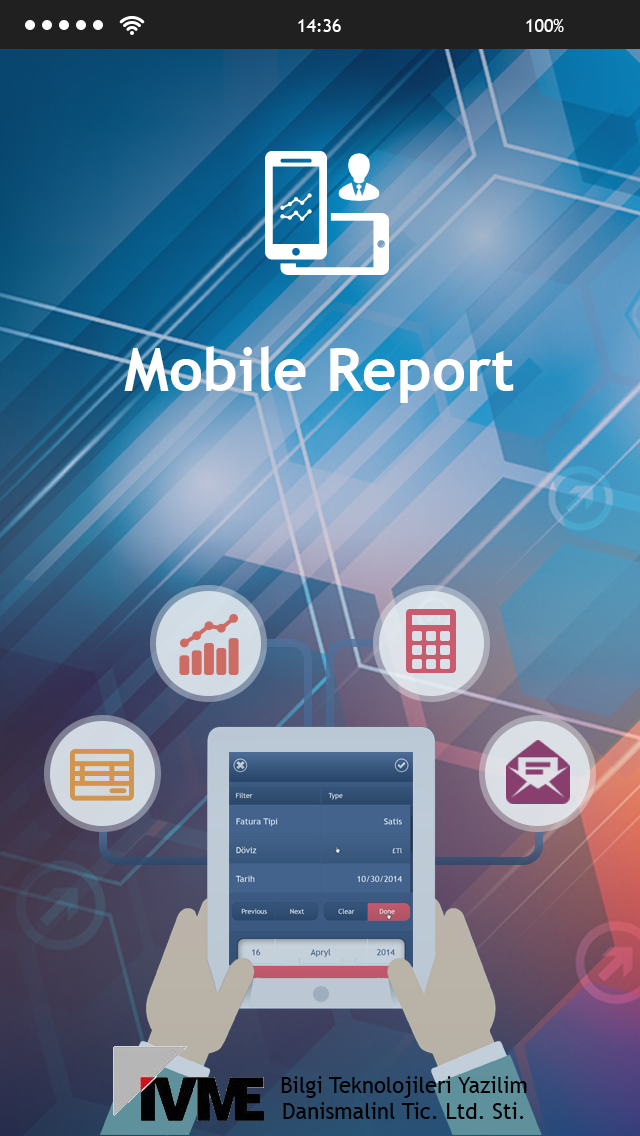
<style>
.page{position:relative;width:640px;height:1136px}
.page>*{position:absolute;margin:0}
.t1{font:60px "TrebuchetMS-Bold";color:#ffffff}
.t2{font:22px "TrebuchetMS";color:#000000}
</style>
<div class="page">
<p class="t1" style="left:124px;top:346px;width:390px;height:57px">Mobile Report</p>
<p class="t2" style="left:281px;top:1076px;width:246px;height:43px;text-align:center">Bilgi Teknolojileri Yazilim<br>Danismalinl Tic. Ltd. Sti.</p>
</div>
